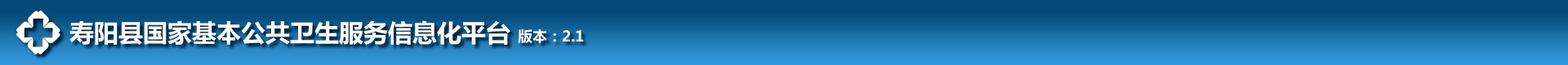
<style>
.page{position:relative;width:1568px;height:65px;background:#034a79}
.page>*{position:absolute;margin:0}
.t1{font:24.5px "MicrosoftYaHei-Bold";color:#ffffff}
.t2{font:14.7px "MicrosoftYaHei-Bold";color:#ffffff}
</style>
<div class="page">
<p class="t1" style="left:69px;top:20px;width:515px;height:25px">寿阳县国家基本公共卫生服务信息化平台 <span class="t2">版本：2.1</span></p>
</div>
